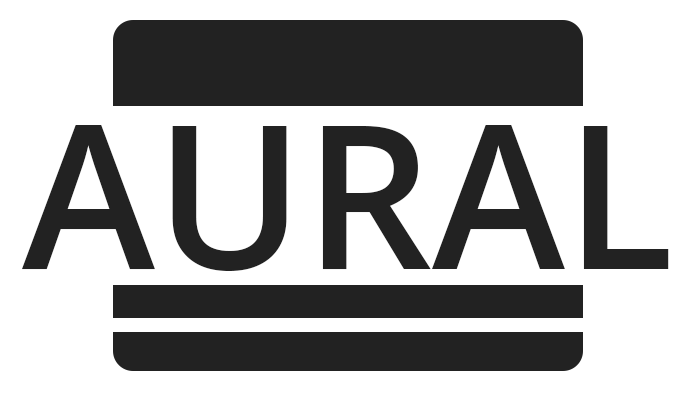
<style>
.page{position:relative;width:695px;height:398px;background:#ffffff}
.page>*{position:absolute;margin:0}
.t1{font:200.7px "OpenSans-Semibold";color:#222222}
</style>
<div class="page">
<p class="t1" style="left:22px;top:125px;width:647px;height:146px">AURAL</p>
</div>
